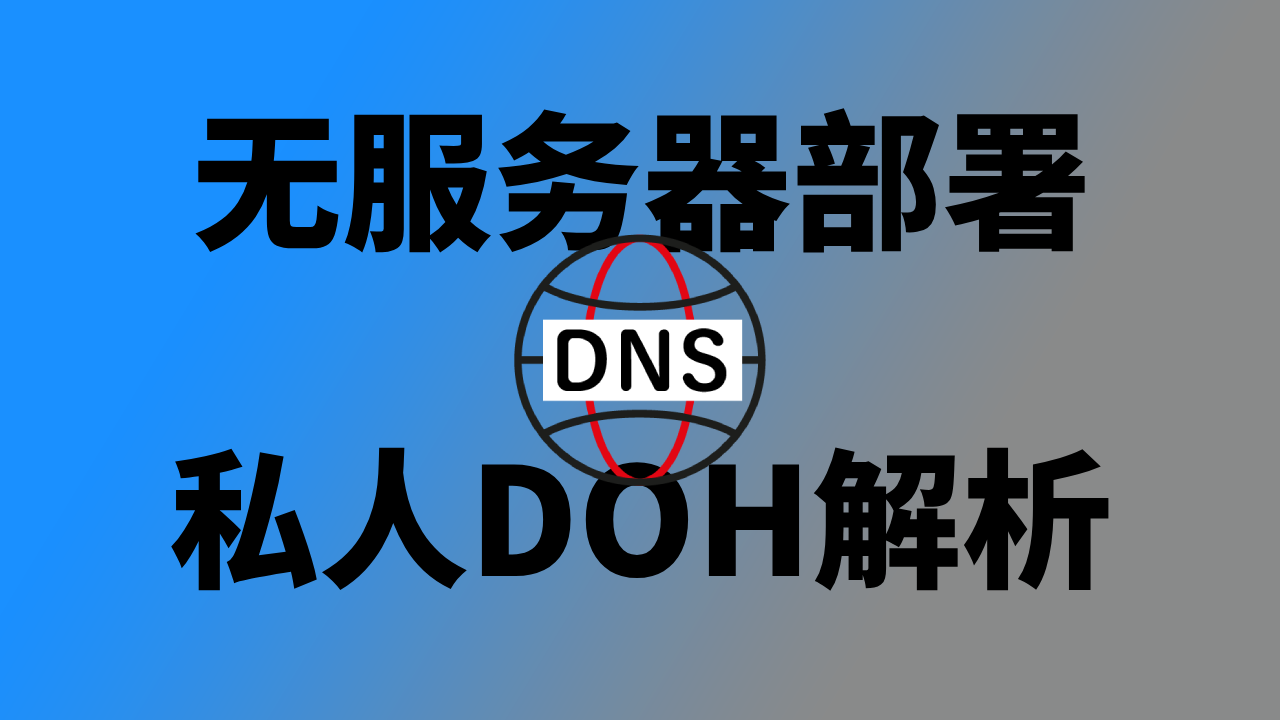
<style>
.page{position:relative;width:1280px;height:720px}
.page>*{position:absolute;margin:0}
.t1{font:150px "SourceHanSansSC-Heavy";color:#000000}
</style>
<div class="page">
<p class="t1" style="left:195px;top:108px;width:890px;height:145px">无服务器部署</p>
<p class="t1" style="left:171px;top:447px;width:938px;height:144px">私人DOH解析</p>
</div>
